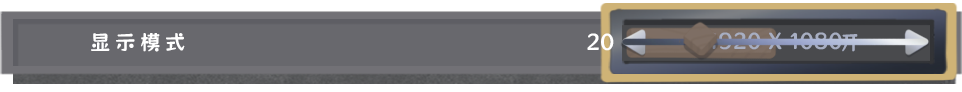
<style>
.page{position:relative;width:962px;height:92px;background:#68686d}
.page>*{position:absolute;margin:0}
.t1{font:20.8px "MaokenZhuyuanTi-Regular";letter-spacing:0.2em;color:#ffffff}
.t2{font:20.8px "MaokenZhuyuanTi-Regular";color:#ffffff}
.t3{font:20.7px "MaokenZhuyuanTi-Regular";color:#a7aec2}
.t4{font:20.6px "MaokenZhuyuanTi-Regular";color:#a7aec2}
</style>
<div class="page">
<p class="t1" style="left:91px;top:33px;width:94px;height:19px">显示模式</p>
<p class="t2" style="left:587px;top:33px;width:27px;height:18px">20</p>
<p class="t3" style="left:709px;top:32px;width:133px;height:18px">1920 X 1080</p>
<p class="t4" style="left:840px;top:34px;width:20px;height:18px">开</p>
</div>
